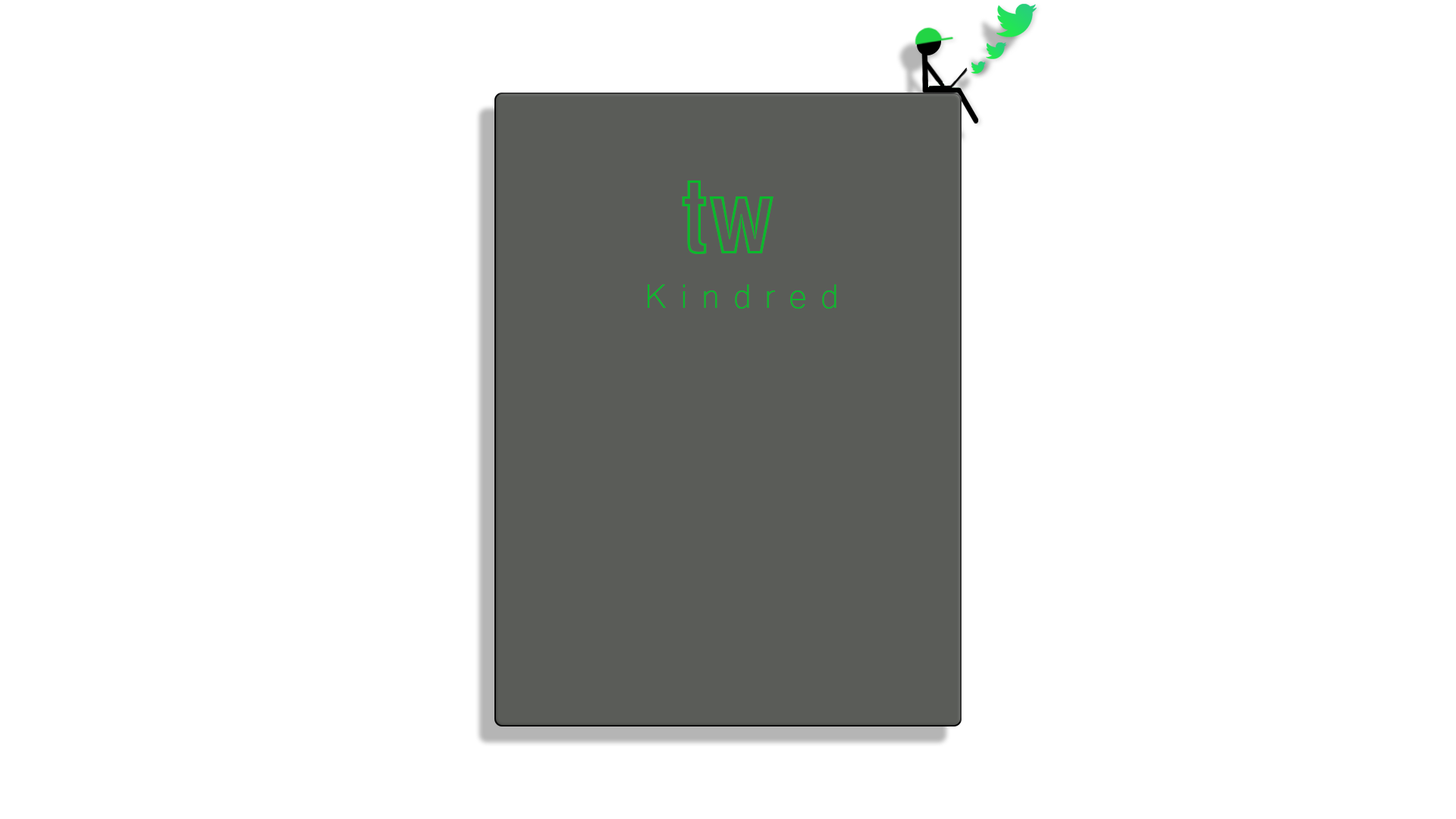
<style>
.page{position:relative;width:1456px;height:819px;background:#ffffff}
.page>*{position:absolute;margin:0}
.t1{font:101.1px "Swiss721BT-BoldCondensedOutline";color:#0bb92c}
.t2{font:44.2px "Microsoft-Yi-Baiti";letter-spacing:0.3em;color:#0bb92c}
</style>
<div class="page">
<p class="t1" style="left:682px;top:180px;width:91px;height:74px">tw</p>
<p class="t2" style="left:648px;top:284px;width:188px;height:25px">Kindred</p>
</div>
